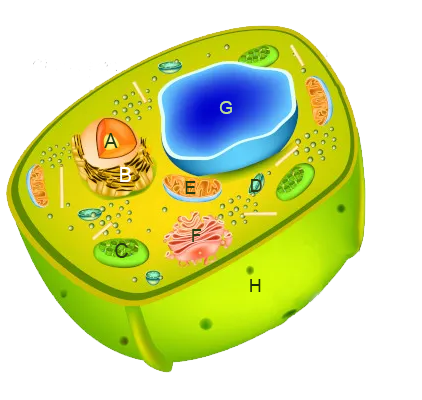
<style>
.page{position:relative;width:422px;height:400px;background:#ffffff}
.page>*{position:absolute;margin:0}
.t1{font:18px "ArialMT";color:#b9dc94}
.t2{font:20px "ArialMT";color:#273d0f}
.t3{font:20px "ArialMT";color:#ffffff}
.t4{font:18px "ArialMT";color:#273d0f}
.t5{font:18px "ArialMT";color:#1d3207}
</style>
<div class="page">
<p class="t1" style="left:219px;top:101px;width:13px;height:13px">G</p>
<p class="t2" style="left:104px;top:133px;width:14px;height:15px">A</p>
<p class="t3" style="left:120px;top:167px;width:11px;height:15px">B</p>
<p class="t4" style="left:185px;top:181px;width:11px;height:13px">E</p>
<p class="t4" style="left:251px;top:179px;width:11px;height:13px">D</p>
<p class="t4" style="left:192px;top:229px;width:10px;height:13px">F</p>
<p class="t2" style="left:115px;top:243px;width:13px;height:15px">C</p>
<p class="t5" style="left:250px;top:279px;width:11px;height:13px">H</p>
</div>
